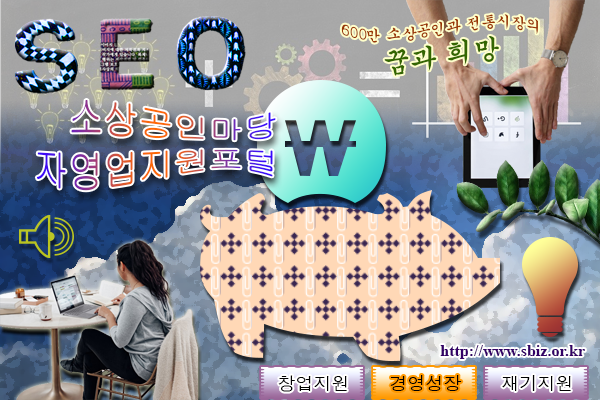
<style>
.page{position:relative;width:600px;height:400px}
.page>*{position:absolute;margin:0}
.t1{font:15px "Gungsuh";color:#993300}
.t2{font:27px "Gungsuh";color:#336600}
.t3{font:16px "TimesNewRomanPS-BoldMT";color:#330066}
.t4{font:18px "Dotum";color:#000000}
</style>
<div class="page">
<p class="t1" style="left:341px;top:14px;width:197px;height:62px;text-align:center">600만 소상공인과 전통시장의<br><span class="t2">꿈과 희망</span></p>
<p class="t3" style="left:440px;top:345px;width:145px;height:14px">http://www.sbiz.or.kr</p>
<p class="t4" style="left:278px;top:375px;width:69px;height:17px">창업지원</p>
<p class="t4" style="left:390px;top:375px;width:72px;height:16px">경영성장</p>
<p class="t4" style="left:502px;top:375px;width:69px;height:16px">재기지원</p>
</div>
